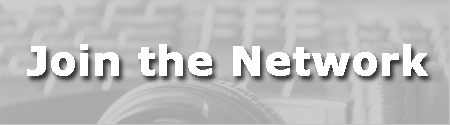
<style>
.page{position:relative;width:450px;height:125px}
.page>*{position:absolute;margin:0}
.t1{font:40px "Verdana-Bold";color:#ffffff;font-weight:bold}
</style>
<div class="page">
<p class="t1" style="left:27px;top:44px;width:401px;height:32px">Join the Network</p>
</div>
